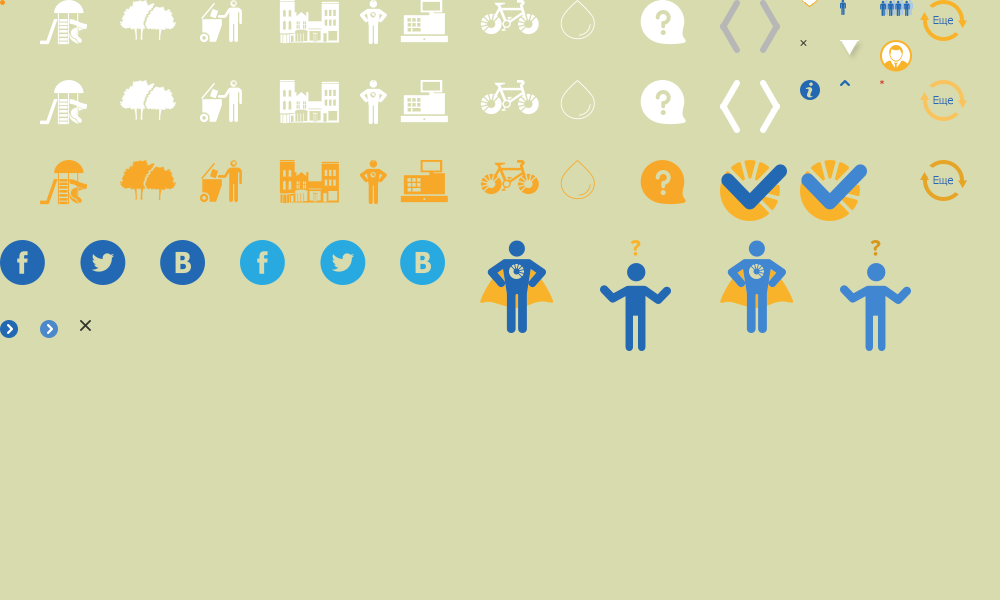
<style>
.page{position:relative;width:1000px;height:600px;background:#d8dbae}
.page>*{position:absolute;margin:0}
.t1{font:11px "Tahoma";color:#2368b2}
</style>
<div class="page">
<p class="t1" style="left:933px;top:16px;width:20px;height:10px">Еще</p>
<p class="t1" style="left:933px;top:96px;width:20px;height:10px">Еще</p>
<p class="t1" style="left:933px;top:176px;width:20px;height:10px">Еще</p>
</div>
